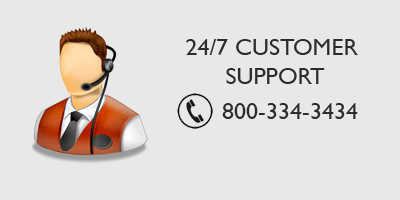
<style>
.page{position:relative;width:400px;height:200px;background:#e8e8e8}
.page>*{position:absolute;margin:0}
.t1{font:24px "GillSans";color:#2c2c2c}
</style>
<div class="page">
<p class="t1" style="left:186px;top:39px;width:172px;height:45px;text-align:center">24/7 CUSTOMER <br>SUPPORT</p>
<p class="t1" style="left:222px;top:103px;width:136px;height:16px">800-334-3434</p>
</div>
